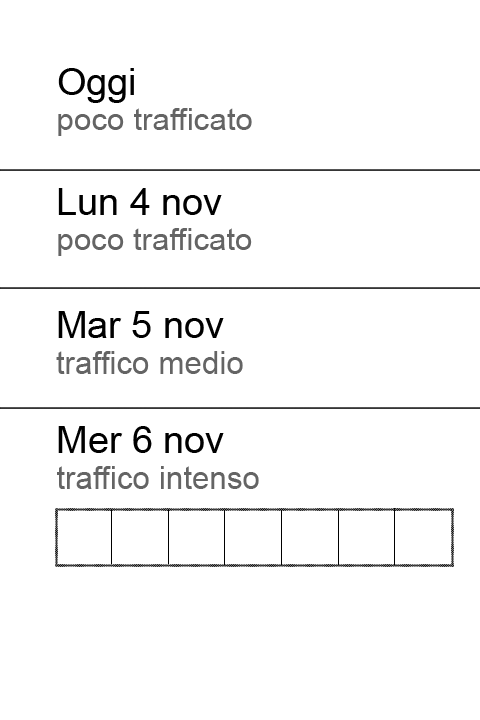
<style>
.page{position:relative;width:480px;height:720px;background:#ffffff}
.page>*{position:absolute;margin:0}
.t1{font:37.7px "ArialMT";color:#000000}
.t2{font:31.3px "ArialMT";color:#646464}
.t3{font:37.8px "ArialMT";color:#000000}
.t4{font:31.4px "ArialMT";color:#646464}
.t5{font:38px "ArialMT";color:#000000}
.t6{font:31.6px "ArialMT";color:#646464}
</style>
<div class="page">
<p class="t1" style="left:58px;top:68px;width:76px;height:35px">Oggi</p>
<p class="t2" style="left:58px;top:108px;width:194px;height:28px">poco trafficato</p>
<p class="t3" style="left:58px;top:188px;width:164px;height:27px">Lun 4 nov</p>
<p class="t4" style="left:58px;top:228px;width:194px;height:28px">poco trafficato</p>
<p class="t5" style="left:58px;top:311px;width:166px;height:27px">Mar 5 nov</p>
<p class="t6" style="left:56px;top:351px;width:187px;height:23px">traffico medio</p>
<p class="t5" style="left:58px;top:426px;width:166px;height:27px">Mer 6 nov</p>
<p class="t6" style="left:57px;top:466px;width:202px;height:23px">traffico intenso</p>
</div>
